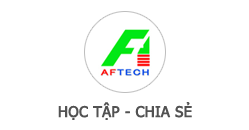
<style>
.page{position:relative;width:249px;height:130px;background:#ffffff}
.page>*{position:absolute;margin:0}
.t1{font:14.7px "Tahoma";color:#525252;font-weight:bold}
</style>
<div class="page">
<p class="t1" style="left:58px;top:102px;width:134px;height:18px">HỌC TẬP - CHIA SẺ</p>
</div>
